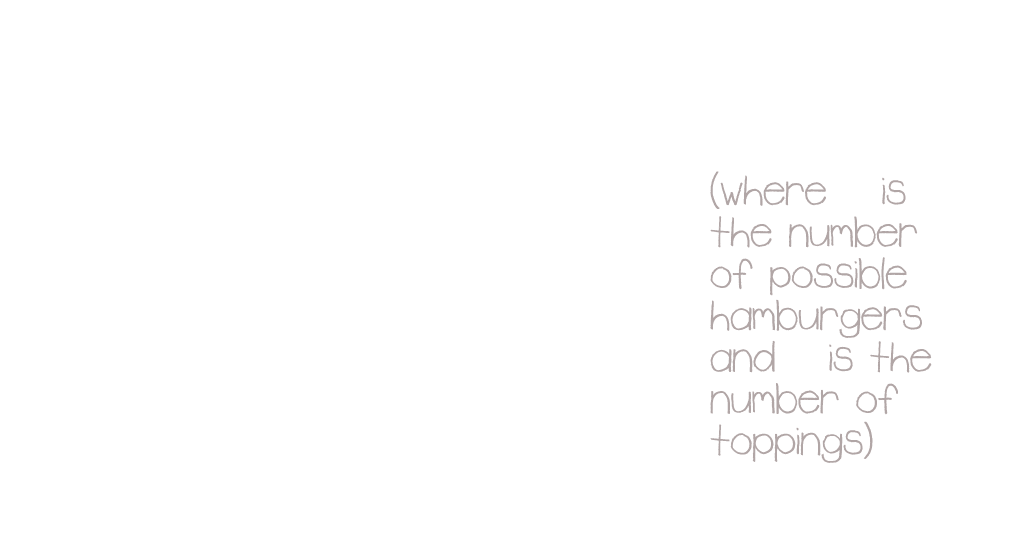
<style>
.page{position:relative;width:1025px;height:555px;background:#ffffff}
.page>*{position:absolute;margin:0}
.t1{font:50px/41.7px "Rudiment";color:#b1a6a6}
.t2{font:50px/41.7px "Rudiment";color:#ffffff}
</style>
<div class="page">
<p class="t1" style="left:710px;top:171px;width:222px;height:292px">(where <span class="t2">b </span>is<br>the number<br>of possible<br>hamburgers<br>and<span class="t2"> n </span>is the<br>number of<br>toppings)</p>
</div>
